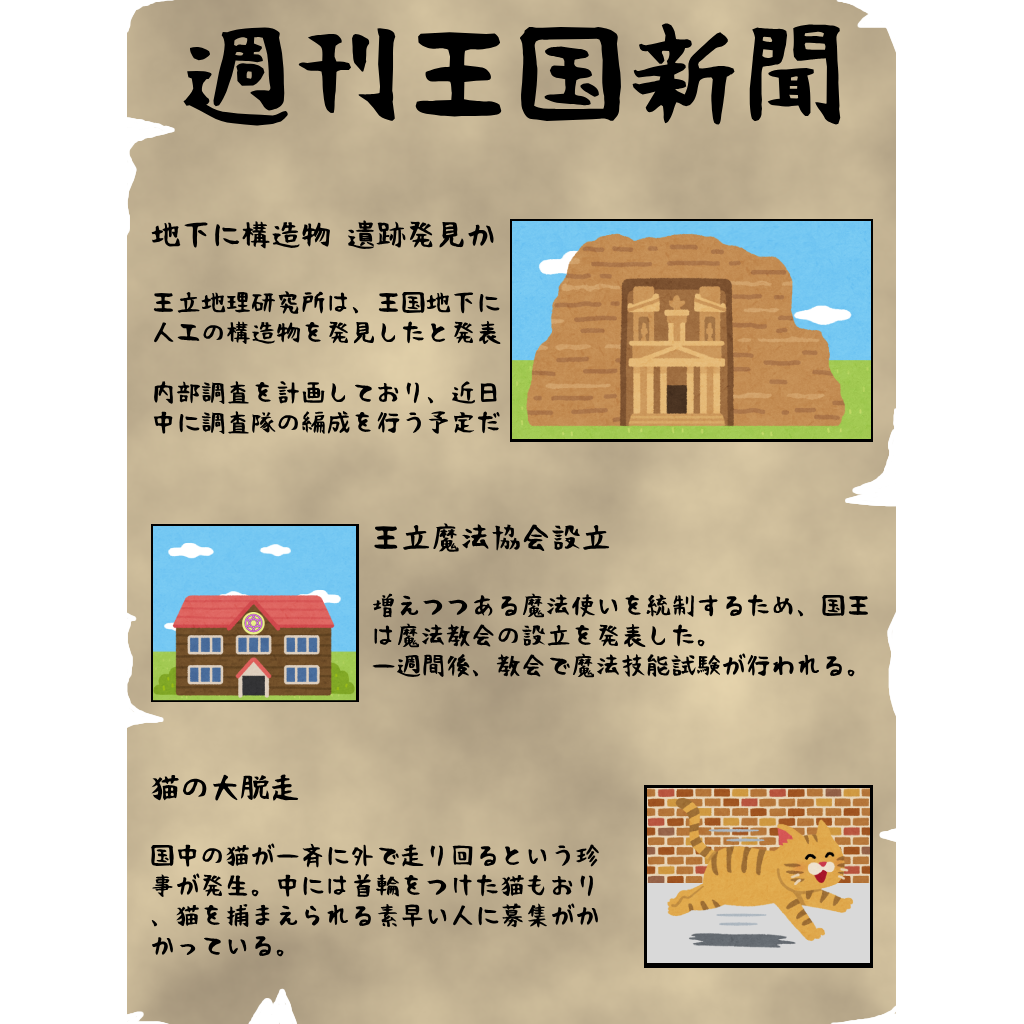
<style>
.page{position:relative;width:1024px;height:1024px;background:#ffffff}
.page>*{position:absolute;margin:0}
.t1{font:112px "RiiTegakiFude";color:#000000}
.t2{font:25px "RiiTegakiFude";color:#000000}
.t3{font:30px "RiiTegakiFude";color:#000000}
</style>
<div class="page">
<p class="t1" style="left:183px;top:23px;width:658px;height:103px">週刊王国新聞</p>
<p class="t2" style="left:151px;top:220px;width:350px;height:214px"><span class="t3">地下に構造物 遺跡発見か<br><br></span>王立地理研究所は、王国地下に人工の構造物を発見したと発表<br><br>内部調査を計画しており、近日中に調査隊の編成を行う予定だ</p>
<p class="t2" style="left:372px;top:523px;width:496px;height:155px"><span class="t3">王立魔法協会設立<br><br></span>増えつつある魔法使いを統制するため、国王は魔法教会の設立を発表した。<br>一週間後、教会で魔法技能試験が行われる。</p>
<p class="t2" style="left:151px;top:774px;width:448px;height:183px"><span class="t3">猫の大脱走<br><br></span>国中の猫が一斉に外で走り回るという珍事が発生。中には首輪をつけた猫もおり、猫を捕まえられる素早い人に募集がかかっている。</p>
</div>
